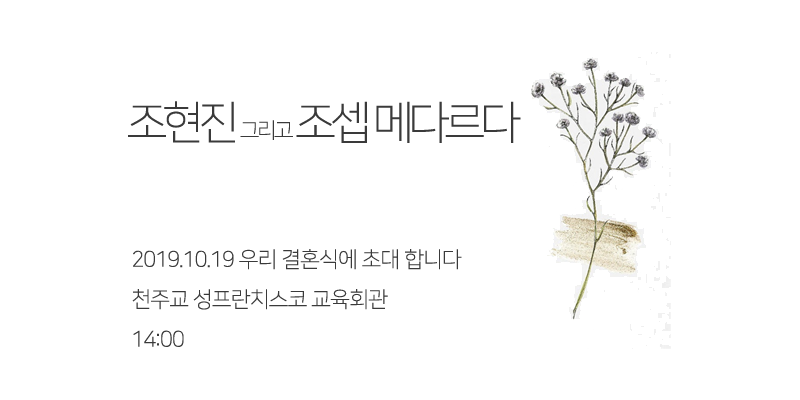
<style>
.page{position:relative;width:800px;height:400px;background:#ffffff}
.page>*{position:absolute;margin:0}
.t1{font:45.3px "NanumSquareL";letter-spacing:-0.12em;color:#3a3a3a}
.t2{font:21.6px "NanumSquareL";letter-spacing:-0.12em;color:#3a3a3a}
.t3{font:21.8px/40px "NanumSquareL";letter-spacing:-0.04em;color:#3a3a3a}
</style>
<div class="page">
<p class="t1" style="left:128px;top:101px;width:393px;height:42px">조현진 <span class="t2">그리고 </span>조셉 메다르다</p>
<p class="t3" style="left:132px;top:249px;width:330px;height:98px">2019.10.19 우리 결혼식에 초대 합니다<br>천주교 성프란치스코 교육회관<br>14:00</p>
</div>
